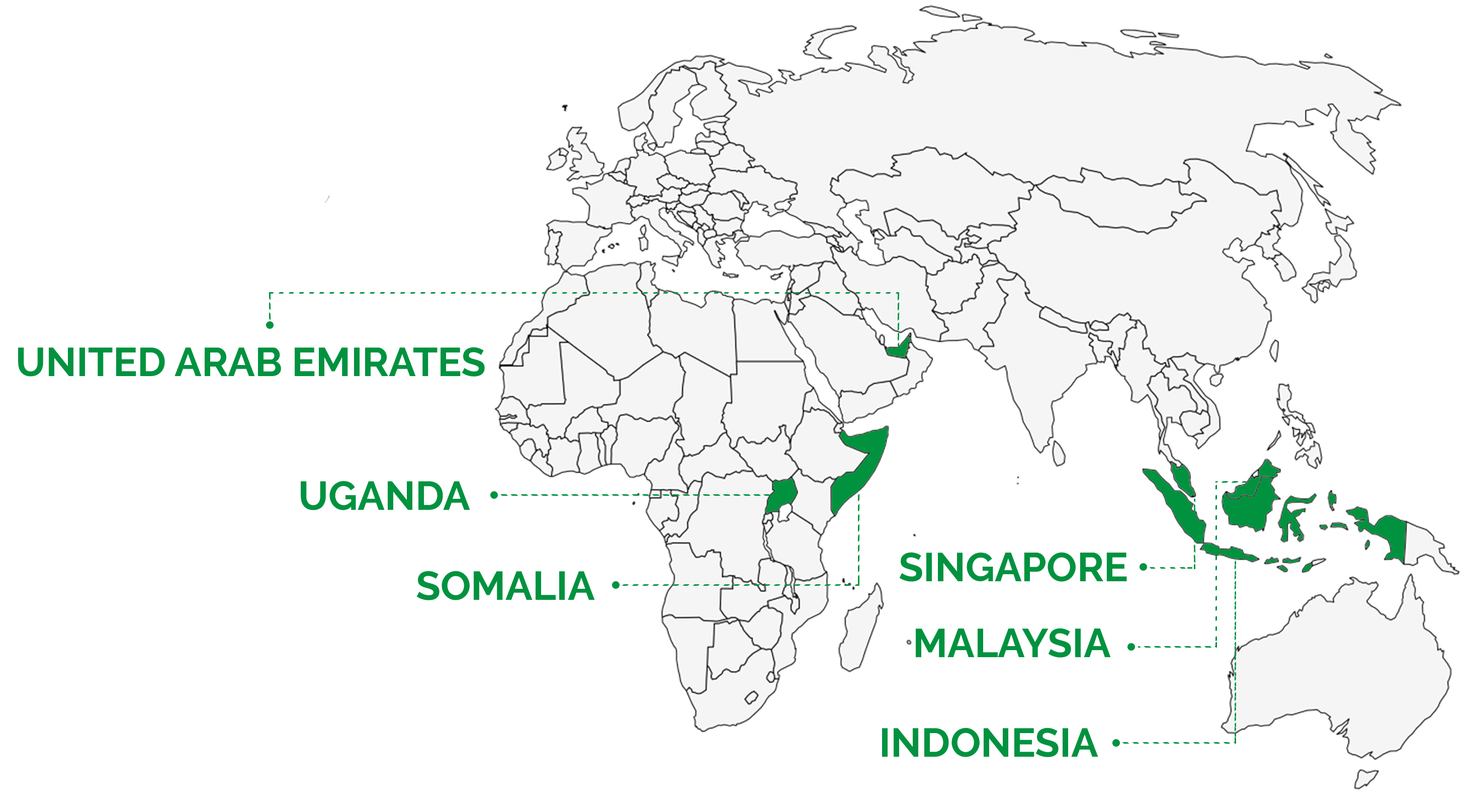
<style>
.page{position:relative;width:1482px;height:805px;background:#ffffff}
.page>*{position:absolute;margin:0}
.t1{font:40.2px "Raleway-Bold";color:#00923f}
</style>
<div class="page">
<p class="t1" style="left:18px;top:347px;width:467px;height:30px">UNITED ARAB EMIRATES</p>
<p class="t1" style="left:301px;top:481px;width:169px;height:29px">UGANDA</p>
<p class="t1" style="left:899px;top:552px;width:228px;height:30px">SINGAPORE</p>
<p class="t1" style="left:416px;top:571px;width:179px;height:29px">SOMALIA</p>
<p class="t1" style="left:915px;top:628px;width:196px;height:30px">MALAYSIA</p>
<p class="t1" style="left:882px;top:727px;width:216px;height:30px">INDONESIA</p>
</div>
